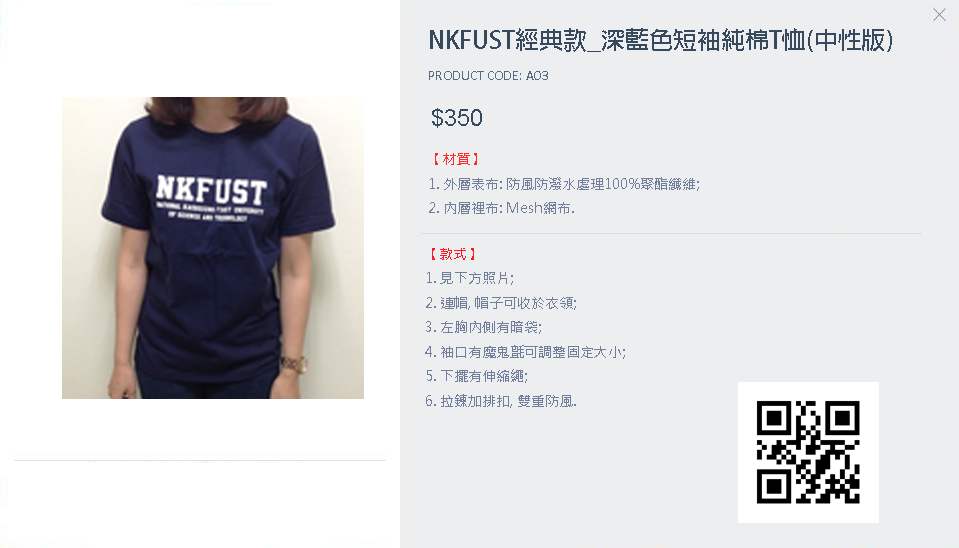
<style>
.page{position:relative;width:959px;height:548px;background:#edeef0}
.page>*{position:absolute;margin:0}
.t1{font:24px "AdobeFanHeitiStd-Bold";color:#37495d}
.t2{font:14px "Calibri";color:#566c84}
.t3{font:24px "ArialMT";color:#37495d}
.t4{font:14px "MicrosoftJhengHeiRegular";color:#717e9a}
.t5{font:14px "MicrosoftJhengHeiRegular";color:#ff2a2a}
.t6{font:14px "MicrosoftJhengHeiRegular";color:#fa1b22}
</style>
<div class="page">
<p class="t1" style="left:430px;top:28px;width:462px;height:24px">NKFUST經典款_深藍色短袖純棉T恤(中性版)</p>
<p class="t2" style="left:429px;top:71px;width:119px;height:9px">PRODUCT CODE: A03</p>
<p class="t3" style="left:432px;top:108px;width:50px;height:20px">$350</p>
<p class="t4" style="left:429px;top:153px;width:270px;height:61px"><span class="t5">【材質】 <br></span>1. 外層表布: 防風防潑水處理100%聚酯纖維; <br>2. 內層裡布: Mesh網布.</p>
<p class="t4" style="left:425px;top:248px;width:200px;height:160px"><span class="t6">【款式】 <br></span>1. 見下方照片; <br>2. 連帽, 帽子可收於衣領; <br>3. 左胸內側有暗袋; <br>4. 袖口有魔鬼氈可調整固定大小; <br>5. 下擺有伸縮繩; <br>6. 拉鍊加排扣, 雙重防風.</p>
</div>
